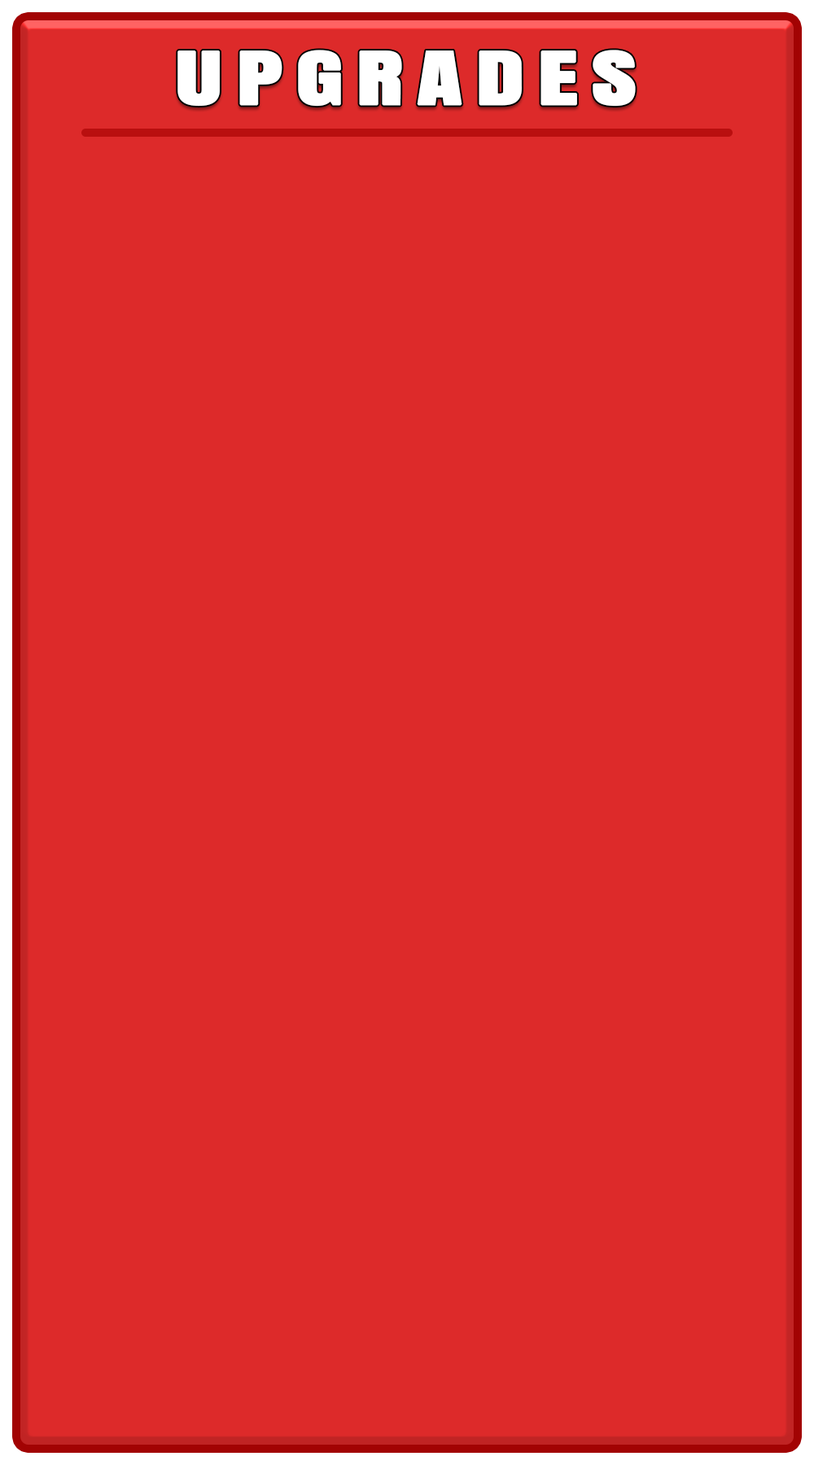
<style>
.page{position:relative;width:814px;height:1465px;background:#dd2a2a}
.page>*{position:absolute;margin:0}
.t1{font:67.8px "Anton";letter-spacing:0.125em;color:#ffffff;font-weight:bold;scale:1.4 1}
</style>
<div class="page">
<p class="t1" style="left:177px;top:50px;width:459px;height:57px">UPGRADES</p>
</div>
